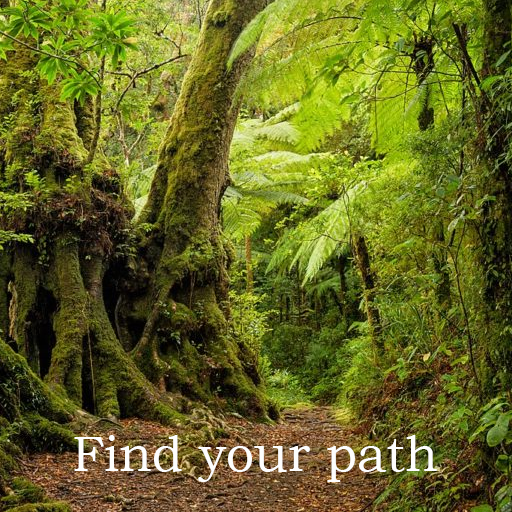
<style>
.page{position:relative;width:512px;height:512px}
.page>*{position:absolute;margin:0}
.t1{font:50px "BookmanOldStyle";color:#fdfdfd}
</style>
<div class="page">
<p class="t1" style="left:74px;top:435px;width:363px;height:47px">Find your path</p>
</div>
